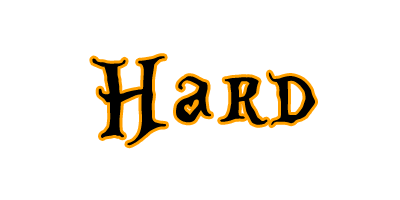
<style>
.page{position:relative;width:400px;height:200px;background:#ffffff}
.page>*{position:absolute;margin:0}
.t1{font:120px "AliceinWonderland";letter-spacing:0.075em;color:#000000}
</style>
<div class="page">
<p class="t1" style="left:92px;top:56px;width:223px;height:90px">Hard</p>
</div>
